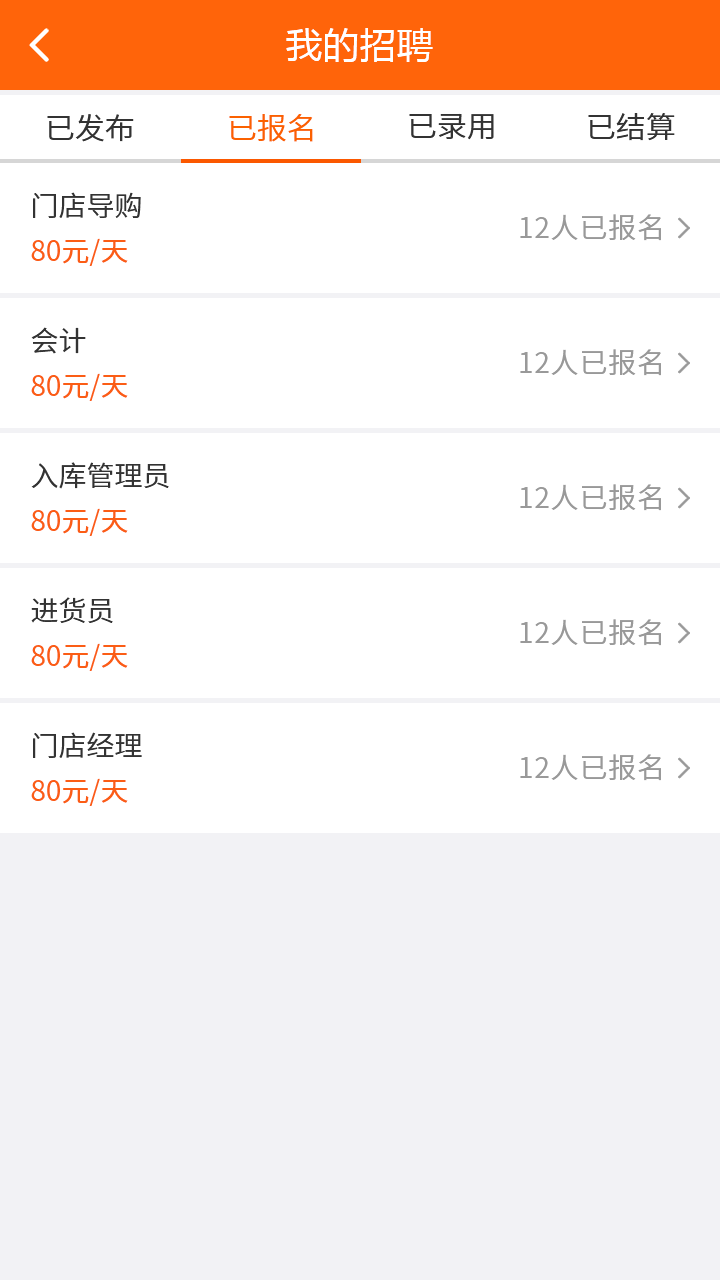
<style>
.page{position:relative;width:720px;height:1280px;background:#ffffff}
.page>*{position:absolute;margin:0}
.t1{font:36px "MicrosoftYaHei";letter-spacing:0.03em;color:#ffffff}
.t2{font:30px "NotoSansCJKsc-DemiLight";color:#333333;font-variant:small-caps}
.t3{font:30px "NotoSansCJKsc-DemiLight";color:#fb6100;font-variant:small-caps}
.t4{font:28px "NotoSansCJKsc-DemiLight";color:#333333;font-variant:small-caps}
.t5{font:28px "NotoSansCJKsc-DemiLight";letter-spacing:0.03em;color:#999999;font-variant:small-caps}
.t6{font:28px "NotoSansCJKsc-Regular";color:#fb5d15;font-variant:small-caps}
</style>
<div class="page">
<p class="t1" style="left:286px;top:28px;width:147px;height:34px">我的招聘</p>
<p class="t2" style="left:409px;top:113px;width:85px;height:27px">已录用</p>
<p class="t2" style="left:588px;top:113px;width:87px;height:28px">已结算</p>
<p class="t2" style="left:47px;top:114px;width:87px;height:28px">已发布</p>
<p class="t3" style="left:229px;top:114px;width:84px;height:28px">已报名</p>
<p class="t4" style="left:33px;top:192px;width:108px;height:26px">门店导购</p>
<p class="t5" style="left:520px;top:214px;width:141px;height:27px">12人已报名</p>
<p class="t6" style="left:31px;top:238px;width:97px;height:28px">80元/天</p>
<p class="t4" style="left:31px;top:327px;width:55px;height:27px">会计</p>
<p class="t5" style="left:520px;top:349px;width:141px;height:27px">12人已报名</p>
<p class="t6" style="left:31px;top:373px;width:97px;height:28px">80元/天</p>
<p class="t4" style="left:31px;top:462px;width:138px;height:27px">入库管理员</p>
<p class="t5" style="left:520px;top:484px;width:141px;height:27px">12人已报名</p>
<p class="t6" style="left:31px;top:508px;width:97px;height:28px">80元/天</p>
<p class="t4" style="left:31px;top:597px;width:82px;height:26px">进货员</p>
<p class="t5" style="left:520px;top:619px;width:141px;height:27px">12人已报名</p>
<p class="t6" style="left:31px;top:643px;width:97px;height:28px">80元/天</p>
<p class="t4" style="left:33px;top:732px;width:109px;height:26px">门店经理</p>
<p class="t5" style="left:520px;top:754px;width:141px;height:27px">12人已报名</p>
<p class="t6" style="left:31px;top:778px;width:97px;height:28px">80元/天</p>
</div>
